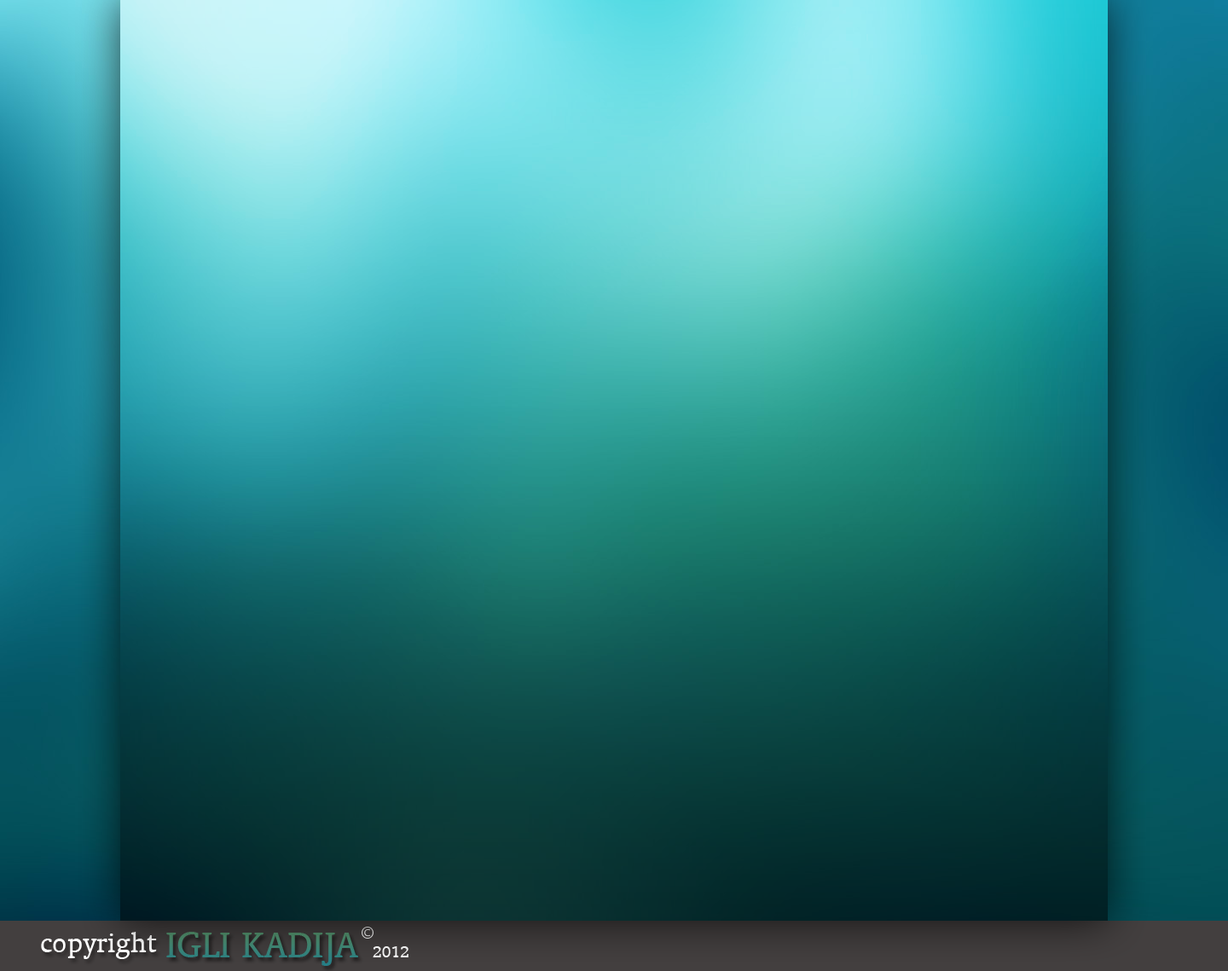
<style>
.page{position:relative;width:1228px;height:971px}
.page>*{position:absolute;margin:0}
.t1{font:30px "OrandaBT-Roman";color:#ffffff}
.t2{font:41px "OrandaBT-Roman";color:#3d8070;text-transform:uppercase}
.t3{font:30px "OrandaBT-Roman";color:#3d8070}
.t4{font:18.9px "OrandaBT-Roman";color:#ffffff}
</style>
<div class="page">
<p class="t1" style="left:41px;top:932px;width:116px;height:27px">copyright</p>
<p class="t2" style="left:166px;top:932px;width:192px;height:34px"><span class="t3">        </span>Igli Kadija</p>
<p class="t4" style="left:373px;top:946px;width:35px;height:12px">2012</p>
</div>
